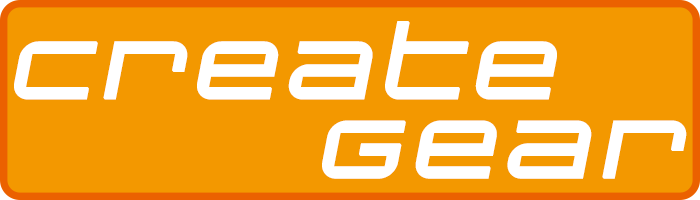
<style>
.page{position:relative;width:700px;height:200px;background:#f39800}
.page>*{position:absolute;margin:0}
.t1{font:100px/79.2px "ChangelingNeo";letter-spacing:0.1em;color:#ffffff;font-weight:bold;font-style:italic}
</style>
<div class="page">
<p class="t1" style="left:14px;top:21px;width:673px;height:158px;text-align:right">Create<br>Gear</p>
</div>
